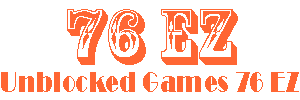
<style>
.page{position:relative;width:300px;height:100px;background:#ffffff}
.page>*{position:absolute;margin:0}
.t1{font:74px "RosewoodStd-Regular";color:#ff6633}
.t2{font:30px "Broadway";color:#ff6633;scale:0.78 1}
</style>
<div class="page">
<p class="t1" style="left:67px;top:9px;width:171px;height:56px">76 EZ</p>
<p class="t2" style="left:1px;top:72px;width:298px;height:20px">Unblocked Games 76 EZ</p>
</div>
